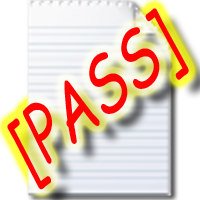
<style>
.page{position:relative;width:200px;height:200px}
.page>*{position:absolute;margin:0}
.t1{font:77.2px "ComicSansMS";color:#fd0404;scale:0.76 1}
</style>
<div class="page">
<p class="t1" style="left:7px;top:8px;width:182px;height:182px;rotate:-39deg">[PASS]</p>
</div>
